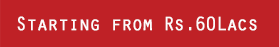
<style>
.page{position:relative;width:279px;height:47px;background:#bf2126}
.page>*{position:absolute;margin:0}
.t1{font:20px "OratorStd";letter-spacing:-0.1em;color:#fdfbfb;font-weight:bold}
</style>
<div class="page">
<p class="t1" style="left:17px;top:16px;width:240px;height:15px">Starting from Rs.60Lacs</p>
</div>
